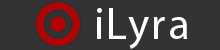
<style>
.page{position:relative;width:220px;height:50px;background:#333333}
.page>*{position:absolute;margin:0}
.t1{font:45.1px "MyriadPro-Regular";letter-spacing:0.04em;color:#ffffff}
</style>
<div class="page">
<p class="t1" style="left:97px;top:8px;width:90px;height:41px">iLyra</p>
</div>
